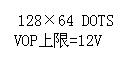
<style>
.page{position:relative;width:128px;height:64px;background:#ffffff}
.page>*{position:absolute;margin:0}
.t1{font:15.8px "SimSun";color:#000000}
</style>
<div class="page">
<p class="t1" style="left:19px;top:15px;width:94px;height:11px">128×64 DOTS</p>
<p class="t1" style="left:14px;top:33px;width:88px;height:15px">VOP上限=12V</p>
</div>
